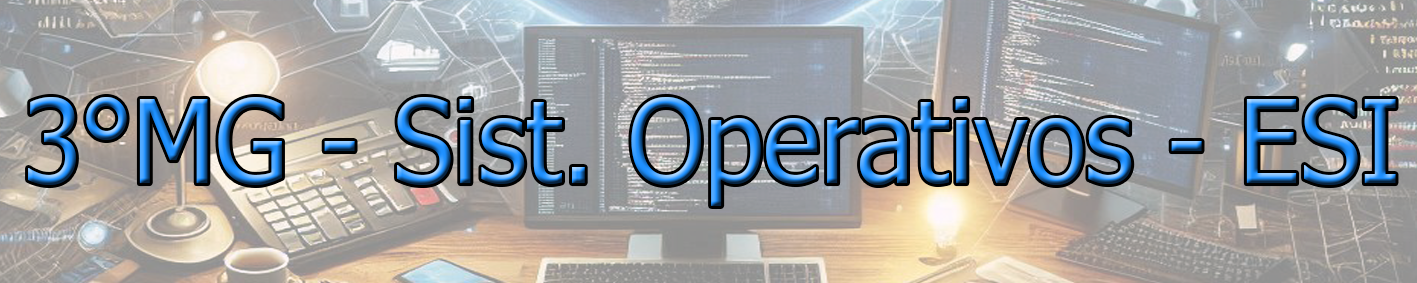
<style>
.page{position:relative;width:1417px;height:283px}
.page>*{position:absolute;margin:0}
.t1{font:114.6px "Tahoma";scale:0.94 1}
</style>
<div class="page">
<p class="t1" style="left:28px;top:97px;width:1368px;height:109px">3°MG - Sist. Operativos - ESI</p>
</div>
